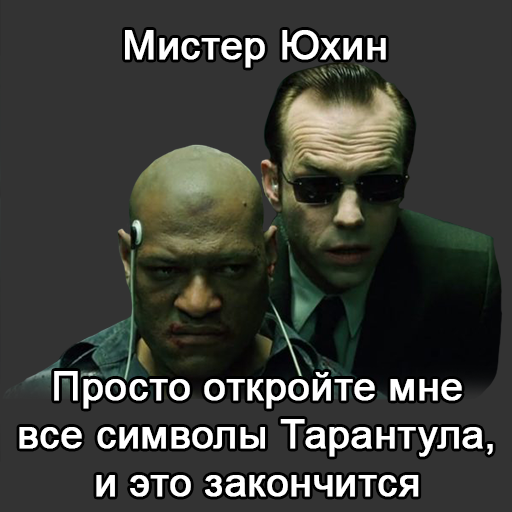
<style>
.page{position:relative;width:512px;height:512px;background:#333333}
.page>*{position:absolute;margin:0}
.t1{font:40px "ArialMT";color:#ffffff;font-weight:bold}
</style>
<div class="page">
<p class="t1" style="left:125px;top:30px;width:261px;height:38px">Мистер Юхин</p>
<p class="t1" style="left:19px;top:371px;width:474px;height:126px;text-align:center">Просто откройте мне<br>все символы Тарантула,<br>и это закончится</p>
</div>
